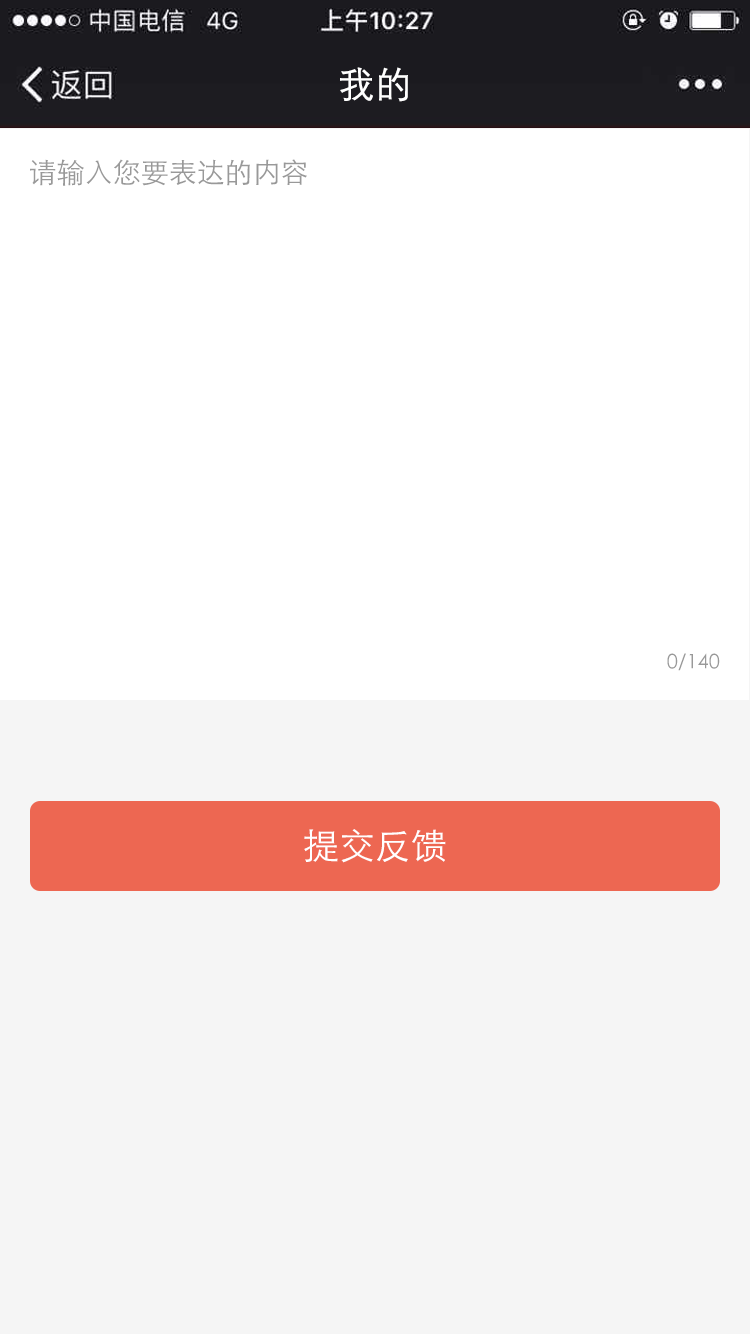
<style>
.page{position:relative;width:750px;height:1334px;background:#ffffff}
.page>*{position:absolute;margin:0}
.t1{font:36px "FZZDXJW--GB1-0";color:#ffffff;font-weight:bold}
.t2{font:28px "STXihei";color:#999999}
.t3{font:20px "STXihei";color:#999999}
.t4{font:36px "STXihei";color:#ffffff}
</style>
<div class="page">
<p class="t1" style="left:340px;top:67px;width:68px;height:35px">我的</p>
<p class="t2" style="left:30px;top:159px;width:277px;height:27px">请输入您要表达的内容</p>
<p class="t3" style="left:667px;top:653px;width:53px;height:18px">0/140</p>
<p class="t4" style="left:304px;top:829px;width:142px;height:34px">提交反馈</p>
</div>
